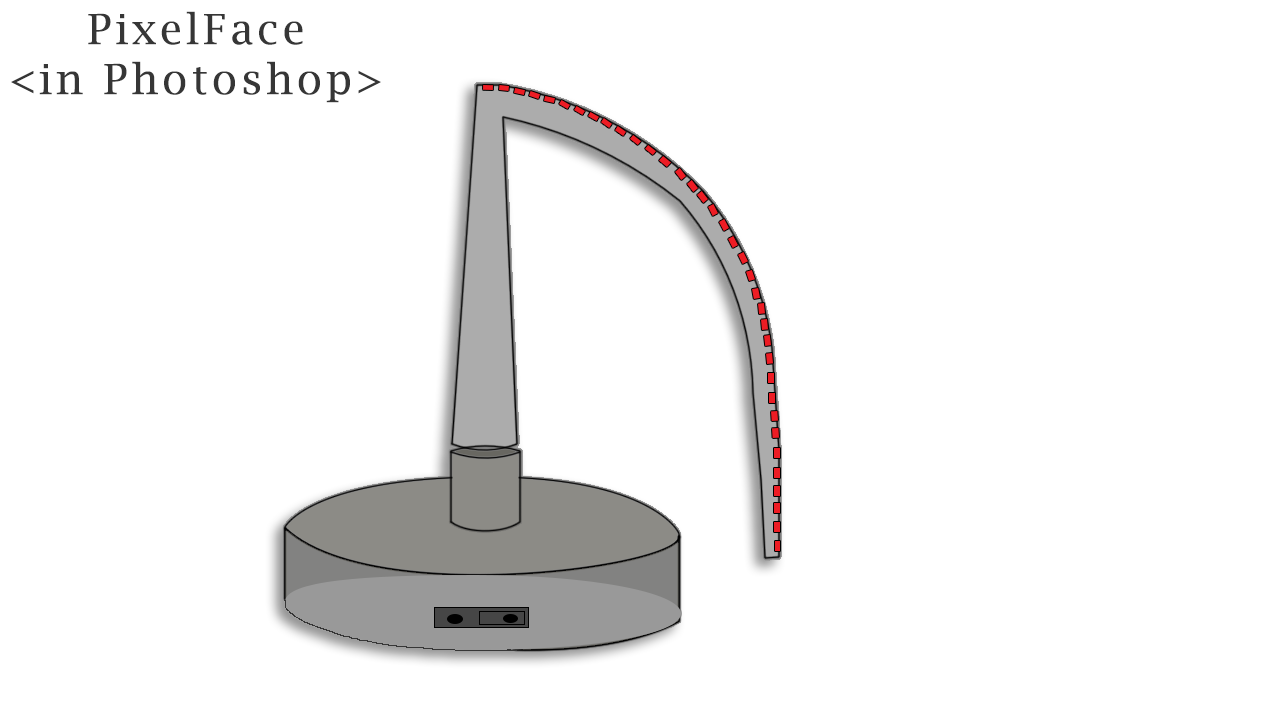
<style>
.page{position:relative;width:1280px;height:720px;background:#ffffff}
.page>*{position:absolute;margin:0}
.t1{font:41.7px "LucidaBright";letter-spacing:0.1em;color:#363636}
</style>
<div class="page">
<p class="t1" style="left:11px;top:11px;width:370px;height:92px;text-align:center">PixelFace<br>&lt;in Photoshop&gt;</p>
</div>
